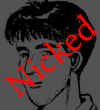
<style>
.page{position:relative;width:100px;height:110px;background:#525252}
.page>*{position:absolute;margin:0}
.t1{font:36px "MinionVariableConcept-Roman";color:#ff0000}
</style>
<div class="page">
<p class="t1" style="left:3px;top:13px;width:95px;height:85px;rotate:-39deg">Nicked</p>
</div>
